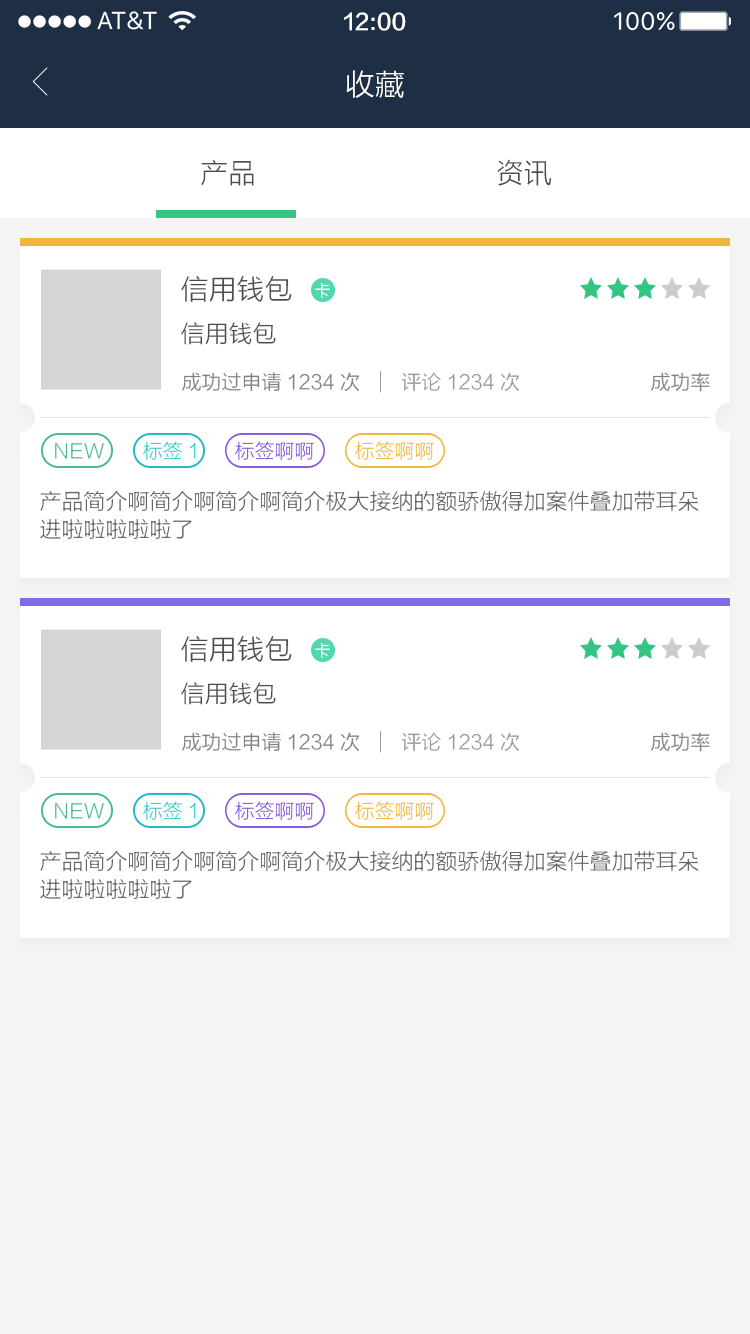
<style>
.page{position:relative;width:750px;height:1334px;background:#ffffff}
.page>*{position:absolute;margin:0}
.t1{font:22px "FZLTZHK--GBK1-0";color:#ffffff}
.t2{font:30px "FZLTXHK";color:#ffffff}
.t3{font:28px "FZLTXHK";color:#4d4d4d}
.t4{font:16px "FZLTXHK";color:#ffffff}
.t5{font:24px "FZLTXHK";color:#4d4d4d}
.t6{font:20px "FZLTXHK";color:#808080}
.t7{font:20px "FZLTXHK";color:#999999}
.t8{font:20px "FZLTXHK";color:#45b991}
.t9{font:20px "FZLTXHK";color:#33cccc}
.t10{font:20px "FZLTXHK";color:#8857db}
.t11{font:20px "FZLTXHK";color:#f1b73c}
.t12{font:22px/28px "FZLTXHK";color:#666666}
</style>
<div class="page">
<p class="t1" style="left:344px;top:12px;width:62px;height:19px">12:00</p>
<p class="t2" style="left:346px;top:70px;width:58px;height:28px">收藏</p>
<p class="t3" style="left:201px;top:160px;width:53px;height:26px">产品</p>
<p class="t3" style="left:497px;top:159px;width:55px;height:27px">资讯</p>
<p class="t3" style="left:181px;top:276px;width:111px;height:26px">信用钱包</p>
<p class="t4" style="left:315px;top:282px;width:15px;height:16px">卡</p>
<p class="t5" style="left:181px;top:322px;width:95px;height:23px">信用钱包</p>
<p class="t6" style="left:182px;top:372px;width:178px;height:20px">成功过申请1234次</p>
<p class="t7" style="left:401px;top:372px;width:119px;height:19px">评论1234次</p>
<p class="t6" style="left:651px;top:372px;width:59px;height:20px">成功率</p>
<p class="t8" style="left:55px;top:443px;width:49px;height:16px">NEW</p>
<p class="t9" style="left:143px;top:441px;width:53px;height:19px">标签1</p>
<p class="t10" style="left:235px;top:441px;width:79px;height:19px">标签啊啊</p>
<p class="t11" style="left:355px;top:441px;width:79px;height:19px">标签啊啊</p>
<p class="t12" style="left:40px;top:490px;width:659px;height:49px">产品简介啊简介啊简介啊简介极大接纳的额骄傲得加案件叠加带耳朵<br>进啦啦啦啦啦了</p>
<p class="t3" style="left:181px;top:636px;width:111px;height:26px">信用钱包</p>
<p class="t4" style="left:315px;top:642px;width:15px;height:16px">卡</p>
<p class="t5" style="left:181px;top:682px;width:95px;height:23px">信用钱包</p>
<p class="t6" style="left:182px;top:732px;width:178px;height:20px">成功过申请1234次</p>
<p class="t7" style="left:401px;top:732px;width:119px;height:19px">评论1234次</p>
<p class="t6" style="left:651px;top:732px;width:59px;height:20px">成功率</p>
<p class="t8" style="left:55px;top:803px;width:49px;height:16px">NEW</p>
<p class="t9" style="left:143px;top:801px;width:53px;height:19px">标签1</p>
<p class="t10" style="left:235px;top:801px;width:79px;height:19px">标签啊啊</p>
<p class="t11" style="left:355px;top:801px;width:79px;height:19px">标签啊啊</p>
<p class="t12" style="left:40px;top:850px;width:659px;height:49px">产品简介啊简介啊简介啊简介极大接纳的额骄傲得加案件叠加带耳朵<br>进啦啦啦啦啦了</p>
</div>
